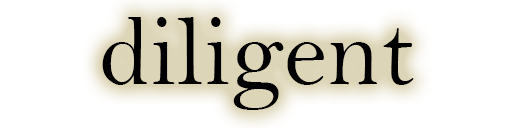
<style>
.page{position:relative;width:512px;height:128px;background:#ffffff}
.page>*{position:absolute;margin:0}
.t1{font:100px "BellMT";color:#000000}
</style>
<div class="page">
<p class="t1" style="left:102px;top:17px;width:312px;height:93px">diligent</p>
</div>
